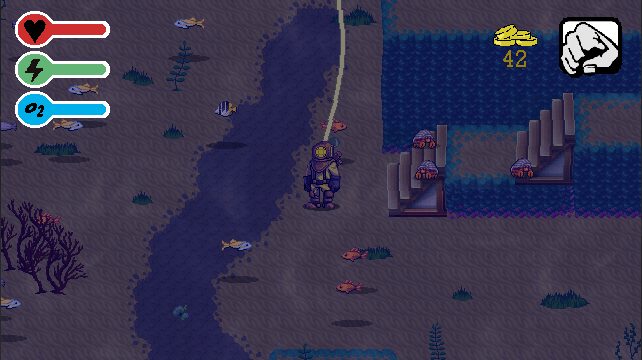
<style>
.page{position:relative;width:642px;height:360px}
.page>*{position:absolute;margin:0}
.t1{font:40px "TimesNewRomanPS-BoldMT";color:#000000}
.t2{font:24px "Rockwell";color:#997d0d}
.t3{font:20px "Marola";color:#000000}
</style>
<div class="page">
<p class="t1" style="left:24px;top:20px;width:22px;height:23px">♥</p>
<p class="t2" style="left:503px;top:50px;width:23px;height:17px">42</p>
<p class="t3" style="left:25px;top:103px;width:19px;height:14px">o2</p>
</div>
